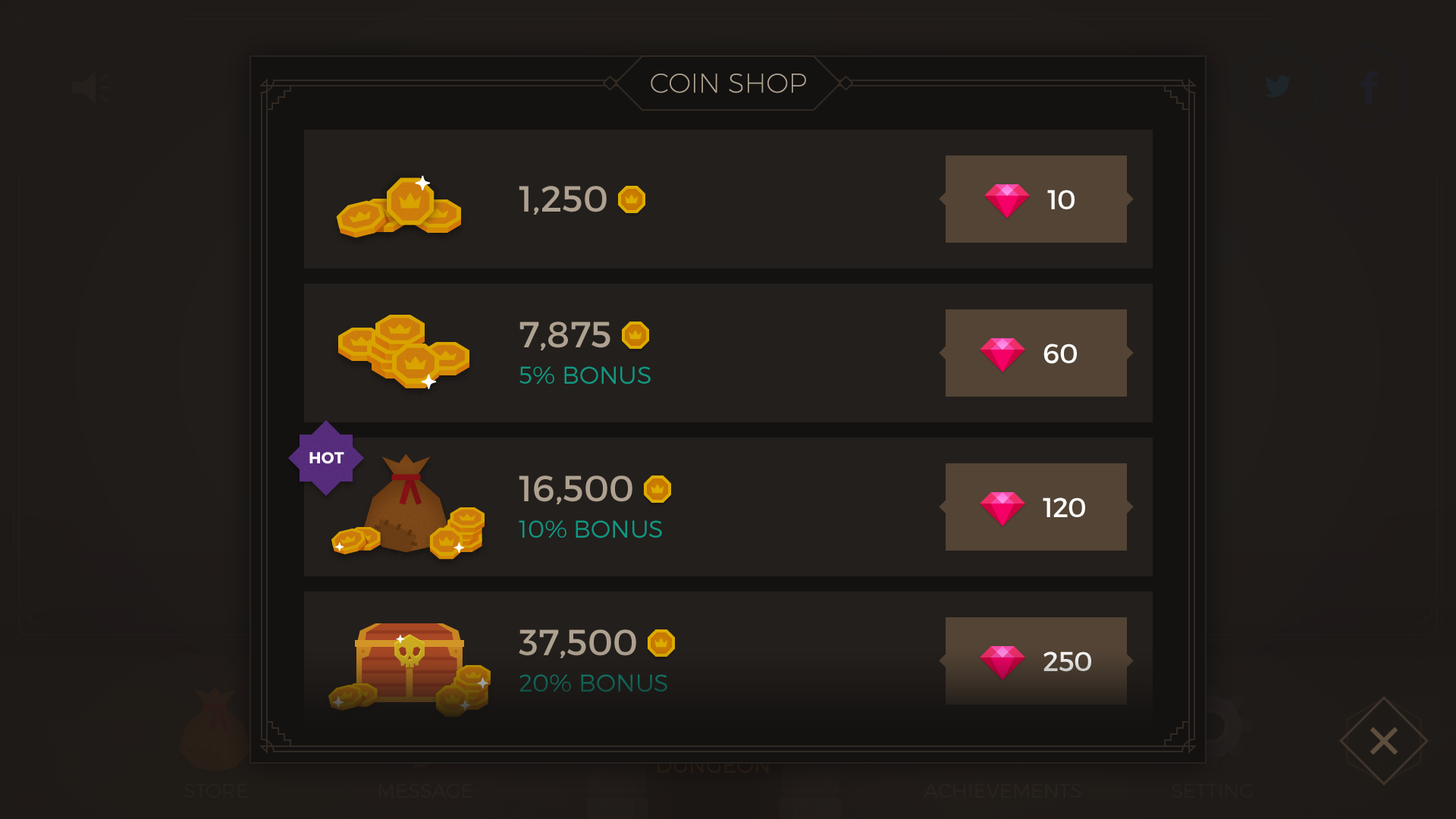
<style>
.page{position:relative;width:1456px;height:819px;background:#231f1c}
.page>*{position:absolute;margin:0}
.t1{font:27.2px "Montserrat-UltraLight";color:#aea190;text-transform:uppercase}
.t2{font:36.4px "Montserrat-Regular";color:#aea190}
.t3{font:27.3px "Montserrat-Regular";color:#ffffff}
.t4{font:24.3px "Montserrat-Light";color:#119782;text-transform:uppercase}
.t5{font:15.9px "Montserrat-Bold";letter-spacing:0.02em;color:#ffffff}
.t6{font:27.3px "Montserrat-Regular";color:#e2e2e2}
.t7{font:24.3px "Montserrat-Light";color:#125f53;text-transform:uppercase}
</style>
<div class="page">
<p class="t1" style="left:651px;top:74px;width:155px;height:19px">coin shop</p>
<p class="t2" style="left:519px;top:186px;width:88px;height:29px">1,250</p>
<p class="t3" style="left:1047px;top:190px;width:28px;height:19px">10</p>
<p class="t2" style="left:519px;top:322px;width:91px;height:28px">7,875</p>
<p class="t3" style="left:1043px;top:344px;width:34px;height:20px">60</p>
<p class="t4" style="left:519px;top:366px;width:132px;height:18px">5% Bonus</p>
<p class="t5" style="left:309px;top:452px;width:35px;height:12px">HOT</p>
<p class="t2" style="left:519px;top:475px;width:113px;height:29px">16,500</p>
<p class="t3" style="left:1043px;top:497px;width:42px;height:20px">120</p>
<p class="t4" style="left:519px;top:520px;width:143px;height:18px">10% Bonus</p>
<p class="t2" style="left:519px;top:629px;width:117px;height:29px">37,500</p>
<p class="t6" style="left:1043px;top:651px;width:48px;height:21px">250</p>
<p class="t7" style="left:519px;top:674px;width:148px;height:18px">20% Bonus</p>
</div>
